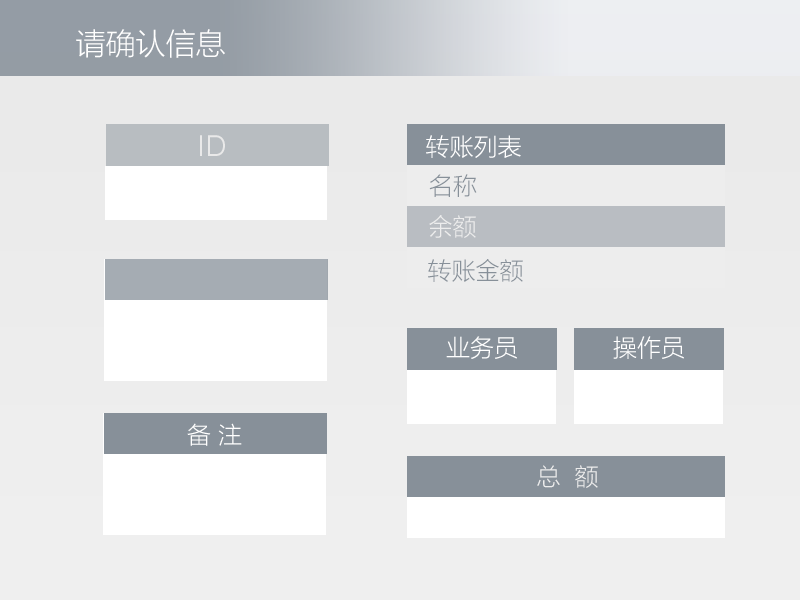
<style>
.page{position:relative;width:800px;height:600px}
.page>*{position:absolute;margin:0}
.t1{font:30px "MicrosoftYaHeiLight";color:#ffffff}
.t2{font:30px "SofiaProLight";color:#e9e9e9}
.t3{font:24px "MicrosoftYaHeiLight";color:#ffffff}
.t4{font:24px "MicrosoftYaHeiLight";color:#879099}
.t5{font:24px "MicrosoftYaHeiLight";color:#ededed}
.t6{font:23.4px "MicrosoftYaHeiLight";color:#ffffff}
</style>
<div class="page">
<p class="t1" style="left:76px;top:29px;width:149px;height:29px">请确认信息</p>
<p class="t2" style="left:200px;top:135px;width:25px;height:21px">ID</p>
<p class="t3" style="left:426px;top:135px;width:95px;height:23px">转账列表</p>
<p class="t4" style="left:429px;top:174px;width:48px;height:23px">名称</p>
<p class="t5" style="left:429px;top:215px;width:47px;height:23px">余额</p>
<p class="t4" style="left:428px;top:259px;width:95px;height:23px">转账金额</p>
<p class="t3" style="left:446px;top:336px;width:71px;height:23px">业务员</p>
<p class="t3" style="left:613px;top:336px;width:71px;height:23px">操作员</p>
<p class="t6" style="left:187px;top:423px;width:55px;height:23px">备 注</p>
<p class="t5" style="left:537px;top:465px;width:61px;height:23px">总  额</p>
</div>
